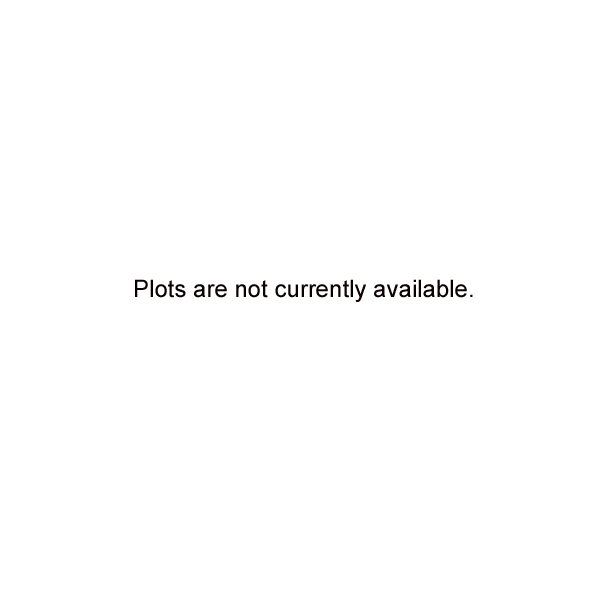
<style>
.page{position:relative;width:600px;height:600px;background:#ffffff}
.page>*{position:absolute;margin:0}
.t1{font:24px "ArialMT";color:#0b0101}
</style>
<div class="page">
<p class="t1" style="left:135px;top:279px;width:338px;height:23px">Plots are not currently available.</p>
</div>
